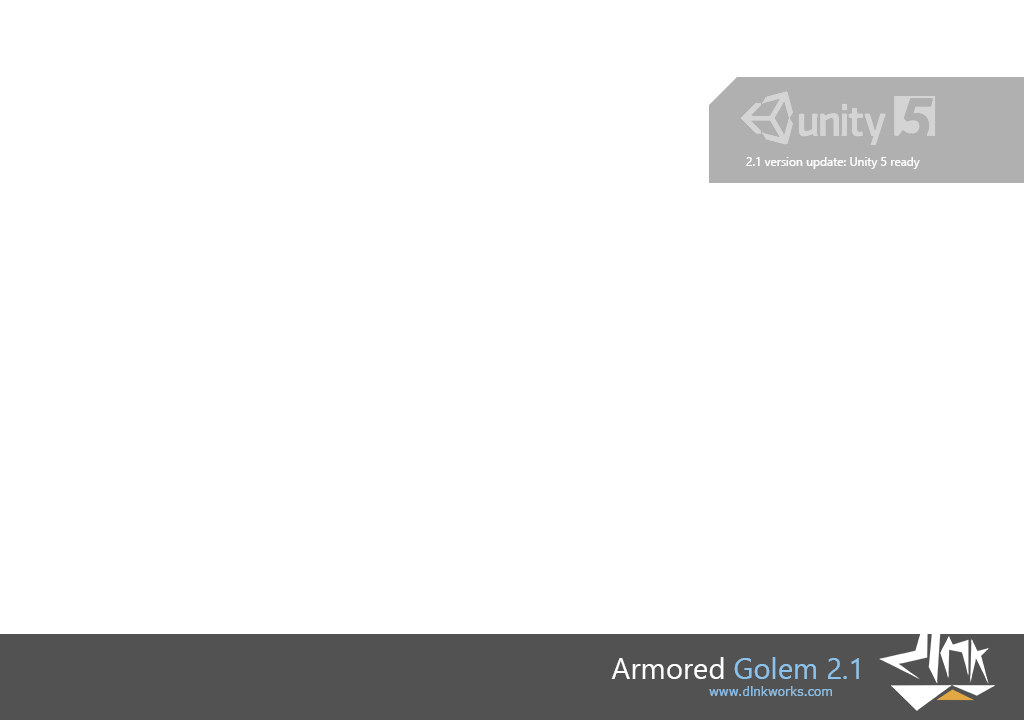
<style>
.page{position:relative;width:1024px;height:720px;background:#ffffff}
.page>*{position:absolute;margin:0}
.t1{font:12px "Gadugi";color:#ffffff}
.t2{font:29.2px "Gadugi";color:#8bc3ef}
.t3{font:29.2px "Gadugi";color:#ffffff}
.t4{font:12px "Verdana";color:#88bfea}
</style>
<div class="page">
<p class="t1" style="left:746px;top:157px;width:174px;height:12px">2.1 version update: Unity 5 ready</p>
<p class="t2" style="left:611px;top:657px;width:248px;height:22px"><span class="t3">Armored </span>Golem 2.1</p>
<p class="t4" style="left:709px;top:686px;width:123px;height:10px">www.dlnkworks.com</p>
</div>
